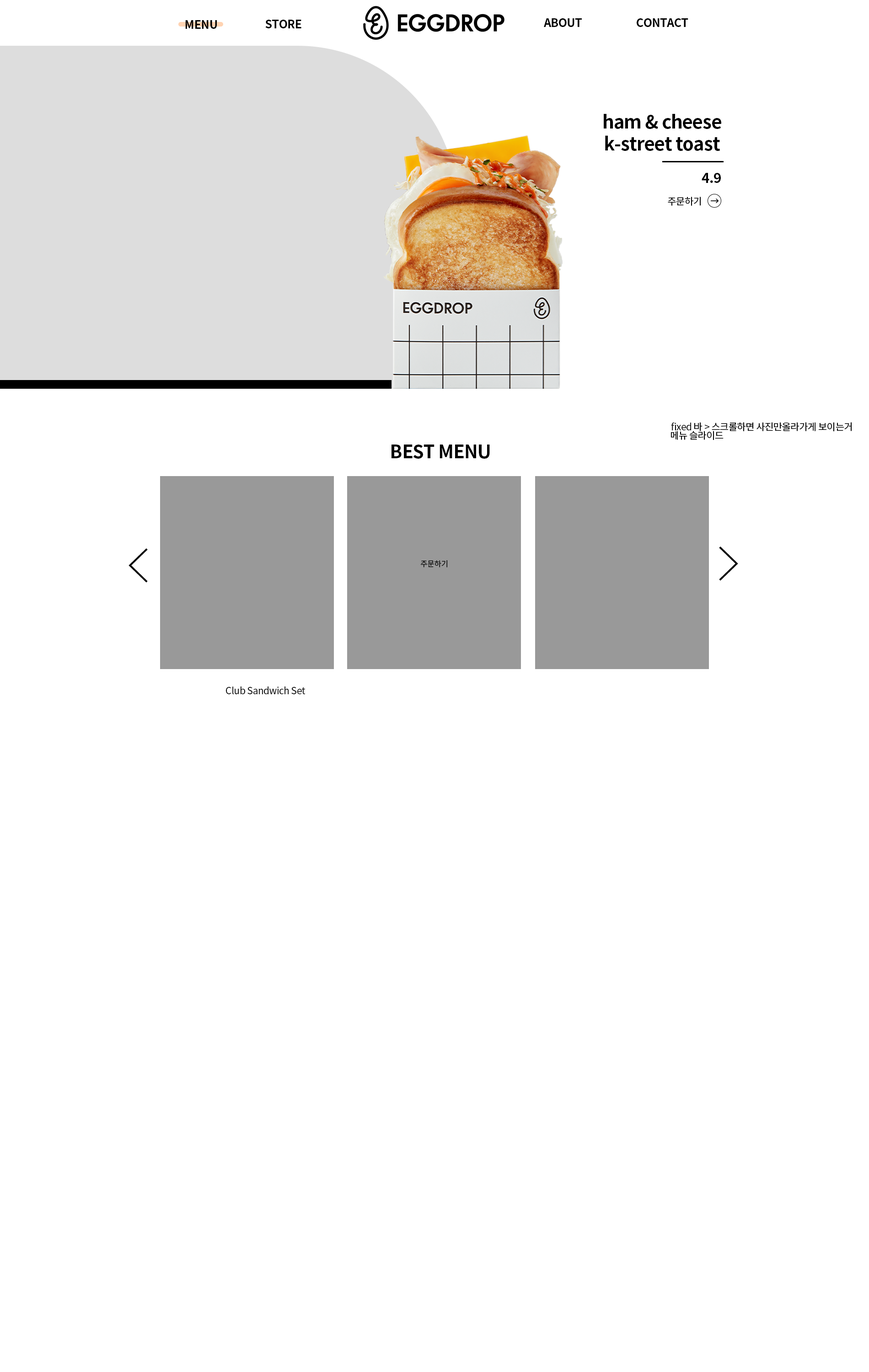
<style>
.page{position:relative;width:869px;height:1372px;background:#ffffff}
.page>*{position:absolute;margin:0}
.t1{font:11.4px "NotoSansKR-Bold";letter-spacing:-0.025em;color:#000000}
.t2{font:18.3px "NotoSansKR-Bold";letter-spacing:-0.025em;color:#000000}
.t3{font:13.7px "NotoSansKR-Bold";letter-spacing:-0.025em;color:#000000}
.t4{font:9.6px "NotoSansKR-Regular";letter-spacing:-0.025em;color:#000000}
.t5{font:7.8px "NotoSansKR-Regular";letter-spacing:-0.025em;color:#000000}
</style>
<div class="page">
<p class="t1" style="left:185px;top:20px;width:32px;height:9px">MENU</p>
<p class="t1" style="left:265px;top:20px;width:36px;height:8px">STORE</p>
<p class="t1" style="left:544px;top:18px;width:38px;height:9px">ABOUT</p>
<p class="t1" style="left:637px;top:18px;width:51px;height:9px">CONTACT</p>
<p class="t2" style="left:604px;top:114px;width:117px;height:37px;text-align:center">ham &amp; cheese <br>k-street toast</p>
<p class="t3" style="left:702px;top:173px;width:19px;height:10px">4.9</p>
<p class="t4" style="left:668px;top:197px;width:33px;height:9px">주문하기</p>
<p class="t4" style="left:671px;top:422px;width:181px;height:9px">fixed 바 &gt; 스크롤하면 사진만올라가게 보이는거</p>
<p class="t4" style="left:671px;top:431px;width:53px;height:9px">메뉴 슬라이드</p>
<p class="t2" style="left:392px;top:445px;width:98px;height:14px">BEST MENU</p>
<p class="t5" style="left:420px;top:560px;width:27px;height:8px">주문하기</p>
<p class="t4" style="left:226px;top:687px;width:80px;height:7px">Club Sandwich Set</p>
</div>
